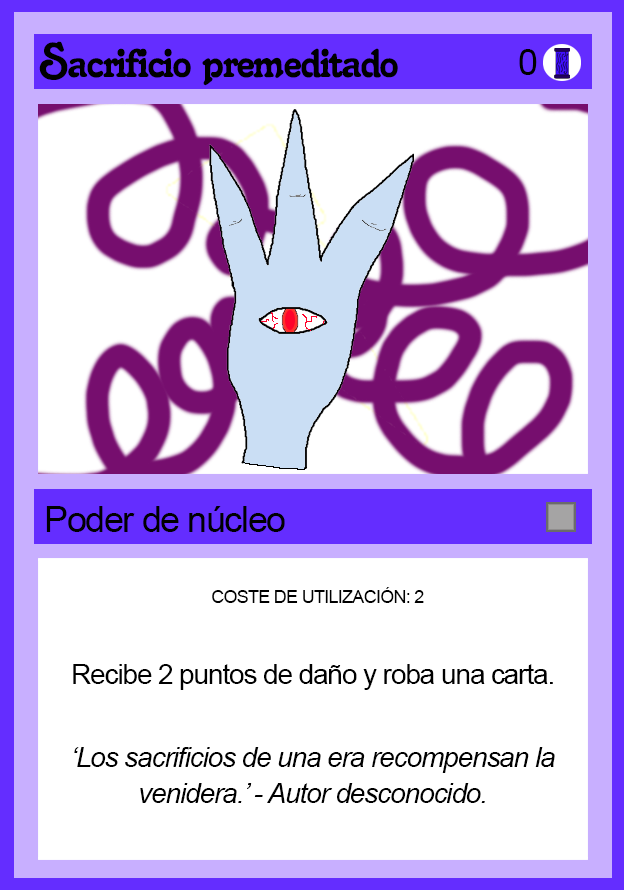
<style>
.page{position:relative;width:624px;height:890px;background:#ffffff}
.page>*{position:absolute;margin:0}
.t1{font:48px "Salina";letter-spacing:-0.04em;color:#000000}
.t2{font:36px "ArialMT";letter-spacing:-0.04em;color:#000000}
.t3{font:18px "ArialMT";letter-spacing:-0.04em;color:#000000}
.t4{font:28px "ArialMT";letter-spacing:-0.04em;color:#000000}
.t5{font:28px/36px "Arial-ItalicMT";letter-spacing:-0.04em;color:#000000}
</style>
<div class="page">
<p class="t1" style="left:39px;top:41px;width:359px;height:45px">Sacrificio premeditado</p>
<p class="t2" style="left:519px;top:49px;width:18px;height:26px">0</p>
<p class="t2" style="left:46px;top:506px;width:239px;height:26px">Poder de núcleo</p>
<p class="t3" style="left:212px;top:587px;width:212px;height:16px">COSTE DE UTILIZACIÓN: 2</p>
<p class="t4" style="left:73px;top:664px;width:480px;height:26px">Recibe 2 puntos de daño y roba una carta.</p>
<p class="t5" style="left:74px;top:747px;width:481px;height:56px;text-align:center">‘Los sacrificios de una era recompensan la venidera.’ - Autor desconocido.</p>
</div>
